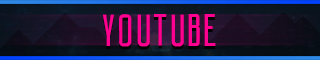
<style>
.page{position:relative;width:320px;height:60px}
.page>*{position:absolute;margin:0}
.t1{font:44.7px "Building-CondensedMedium";letter-spacing:0.05em;color:#ff0090}
</style>
<div class="page">
<p class="t1" style="left:103px;top:14px;width:113px;height:33px">YOUTUBE</p>
</div>
